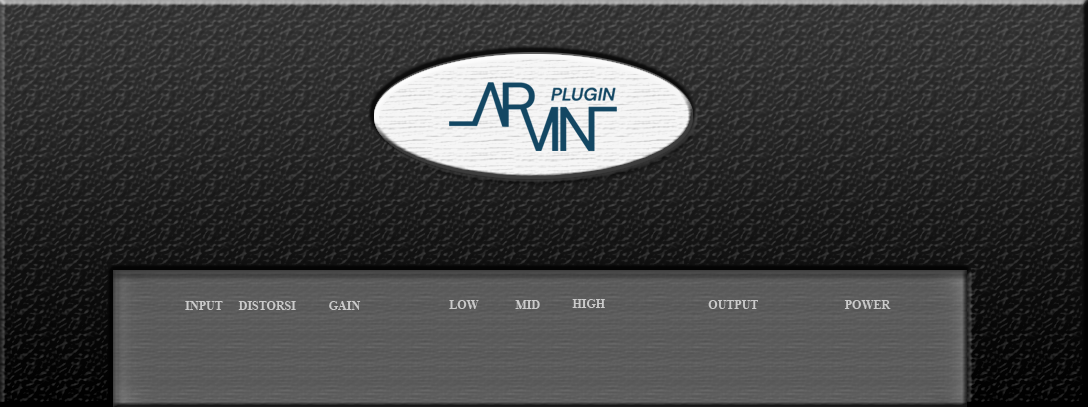
<style>
.page{position:relative;width:1088px;height:407px}
.page>*{position:absolute;margin:0}
.t1{font:12px "TimesNewRomanPS-BoldMT";color:#cacaca}
</style>
<div class="page">
<p class="t1" style="left:185px;top:301px;width:38px;height:9px">INPUT</p>
<p class="t1" style="left:238px;top:301px;width:58px;height:9px">DISTORSI</p>
<p class="t1" style="left:329px;top:301px;width:32px;height:9px">GAIN</p>
<p class="t1" style="left:449px;top:300px;width:30px;height:9px">LOW</p>
<p class="t1" style="left:515px;top:300px;width:25px;height:9px">MID</p>
<p class="t1" style="left:572px;top:299px;width:33px;height:9px">HIGH</p>
<p class="t1" style="left:708px;top:300px;width:50px;height:9px">OUTPUT</p>
<p class="t1" style="left:844px;top:300px;width:47px;height:9px">POWER</p>
</div>
